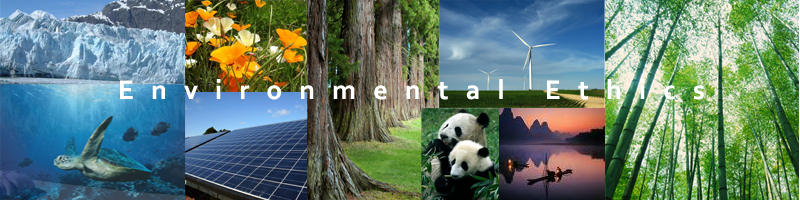
<style>
.page{position:relative;width:800px;height:200px}
.page>*{position:absolute;margin:0}
.t1{font:28px "Corbel-Bold";color:#fefffe}
</style>
<div class="page">
<p class="t1" style="left:120px;top:79px;width:584px;height:21px">E   n   v   i   r   o   n   m   e   n   t   a   l       E   t   h   i   c   s</p>
</div>
